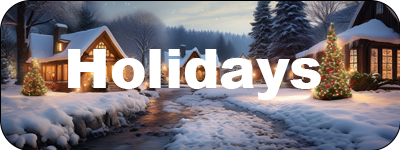
<style>
.page{position:relative;width:400px;height:150px}
.page>*{position:absolute;margin:0}
.t1{font:54.7px "Arial-Black";color:#ffffff}
</style>
<div class="page">
<p class="t1" style="left:68px;top:49px;width:253px;height:51px">Holidays</p>
</div>
